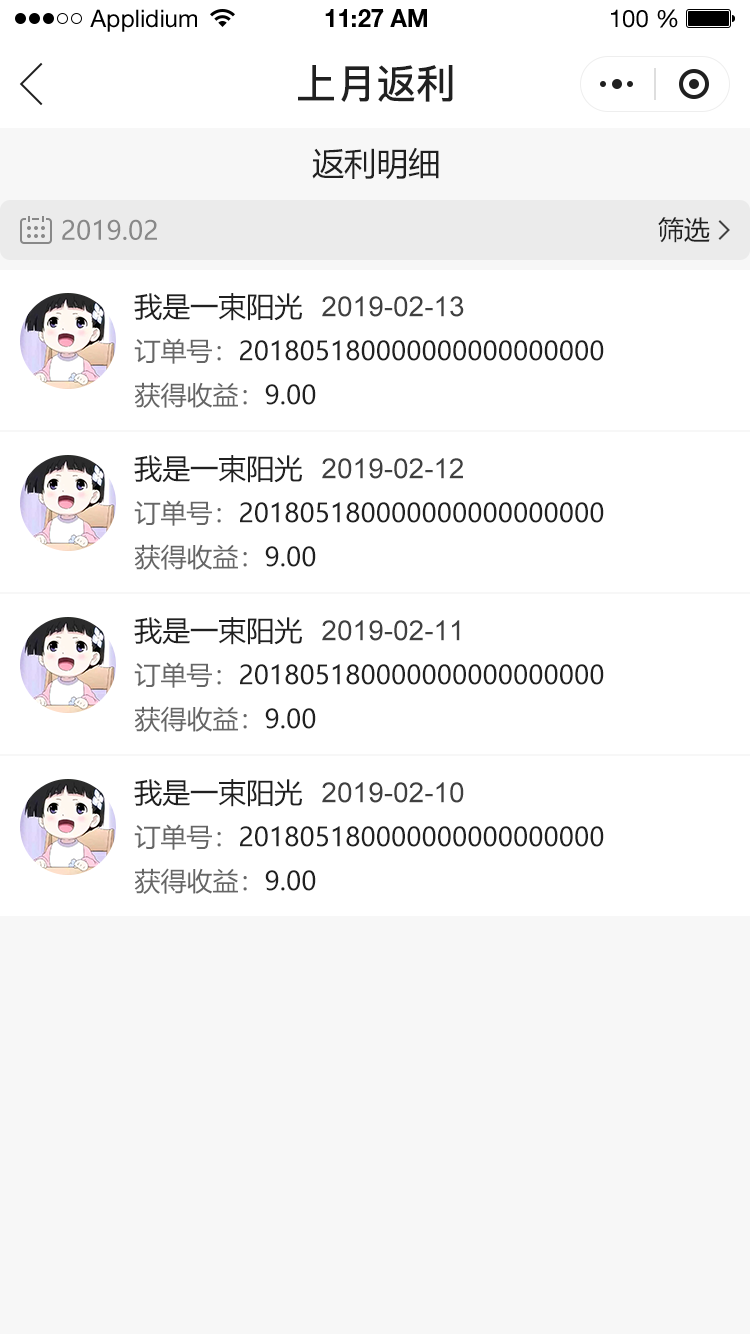
<style>
.page{position:relative;width:750px;height:1334px;background:#ffffff}
.page>*{position:absolute;margin:0}
.t1{font:24px "HelveticaNeueLTStd-Roman";color:#000000}
.t2{font:24px "HelveticaNeueLTStd-Bd";color:#000000}
.t3{font:40px "PingFang-SC-Bold";color:#202020;text-transform:uppercase}
.t4{font:32px "MicrosoftYaHei";color:#202020;text-transform:uppercase}
.t5{font:26px "MicrosoftYaHei";color:#888888;text-transform:uppercase}
.t6{font:26px "MicrosoftYaHei";color:#202020;text-transform:uppercase}
.t7{font:28px "MicrosoftYaHei";color:#202020;text-transform:uppercase}
.t8{font:28px "ArialMT";color:#404040;text-transform:uppercase}
.t9{font:26px "MicrosoftYaHei";color:#666666;text-transform:uppercase}
</style>
<div class="page">
<p class="t1" style="left:90px;top:9px;width:107px;height:23px">Applidium</p>
<p class="t2" style="left:325px;top:9px;width:102px;height:18px">11:27 AM</p>
<p class="t1" style="left:611px;top:9px;width:67px;height:19px">100 %</p>
<p class="t3" style="left:298px;top:65px;width:155px;height:37px">上月返利</p>
<p class="t4" style="left:312px;top:147px;width:127px;height:33px">返利明细</p>
<p class="t5" style="left:62px;top:219px;width:95px;height:21px">2019.02</p>
<p class="t6" style="left:658px;top:217px;width:52px;height:26px">筛选</p>
<p class="t7" style="left:134px;top:293px;width:168px;height:28px">我是一束阳光</p>
<p class="t8" style="left:322px;top:296px;width:142px;height:21px">2019-02-13</p>
<p class="t6" style="left:134px;top:338px;width:470px;height:26px"><span class="t9">订单号：</span>201805180000000000000000</p>
<p class="t9" style="left:134px;top:382px;width:182px;height:26px">获得收益：<span class="t6">9.00</span></p>
<p class="t7" style="left:134px;top:455px;width:168px;height:28px">我是一束阳光</p>
<p class="t8" style="left:322px;top:458px;width:141px;height:21px">2019-02-12</p>
<p class="t6" style="left:134px;top:500px;width:470px;height:26px"><span class="t9">订单号：</span>201805180000000000000000</p>
<p class="t9" style="left:134px;top:544px;width:182px;height:26px">获得收益：<span class="t6">9.00</span></p>
<p class="t7" style="left:134px;top:617px;width:168px;height:28px">我是一束阳光</p>
<p class="t8" style="left:322px;top:620px;width:138px;height:21px">2019-02-11</p>
<p class="t6" style="left:134px;top:662px;width:470px;height:26px"><span class="t9">订单号：</span>201805180000000000000000</p>
<p class="t9" style="left:134px;top:706px;width:182px;height:26px">获得收益：<span class="t6">9.00</span></p>
<p class="t7" style="left:134px;top:779px;width:168px;height:28px">我是一束阳光</p>
<p class="t8" style="left:322px;top:782px;width:142px;height:21px">2019-02-10</p>
<p class="t6" style="left:134px;top:824px;width:470px;height:26px"><span class="t9">订单号：</span>201805180000000000000000</p>
<p class="t9" style="left:134px;top:868px;width:182px;height:26px">获得收益：<span class="t6">9.00</span></p>
</div>
